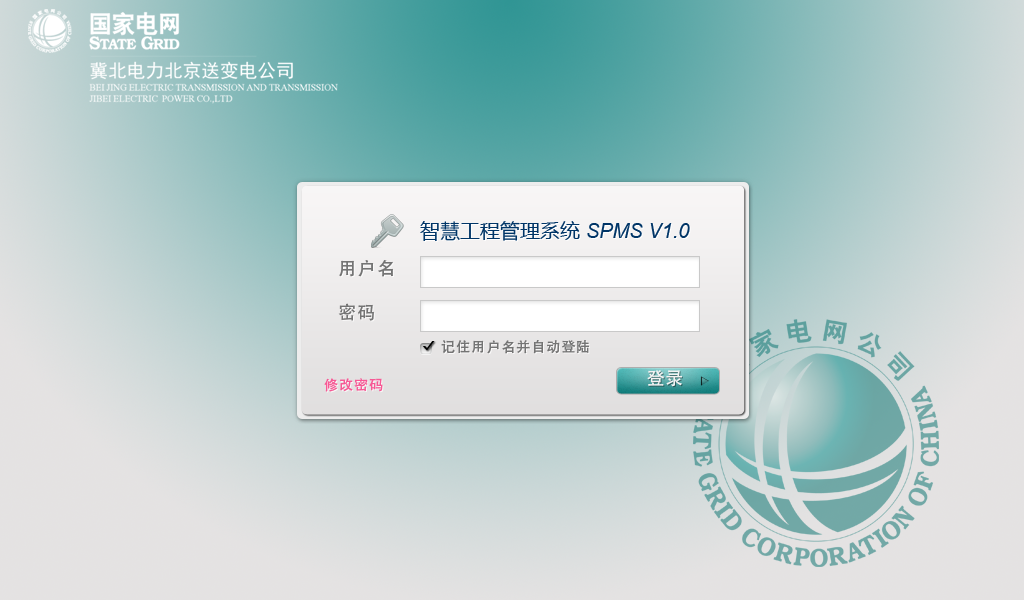
<style>
.page{position:relative;width:1024px;height:600px}
.page>*{position:absolute;margin:0}
.t1{font:20px "Arial-ItalicMT";color:#003567}
.t2{font:20px "MicrosoftYaHei";color:#003567}
.t3{font:18px "AdobeHeitiStd-Regular";letter-spacing:0.075em;color:#747474}
.t4{font:14px "AdobeHeitiStd-Regular";letter-spacing:0.075em;color:#747474}
.t5{font:18px "AdobeHeitiStd-Regular";letter-spacing:0.025em;color:#f3f2f2}
.t6{font:14px "AdobeHeitiStd-Regular";letter-spacing:0.075em;color:#f75995}
</style>
<div class="page">
<p class="t1" style="left:420px;top:221px;width:270px;height:20px"><span class="t2">智慧工程管理系统 </span>SPMS V1.0</p>
<p class="t3" style="left:339px;top:260px;width:54px;height:17px">用户名</p>
<p class="t3" style="left:338px;top:303px;width:36px;height:18px">密码</p>
<p class="t4" style="left:441px;top:340px;width:148px;height:14px">记住用户名并自动登陆</p>
<p class="t5" style="left:647px;top:370px;width:35px;height:17px">登录</p>
<p class="t6" style="left:324px;top:378px;width:59px;height:14px">修改密码</p>
</div>
